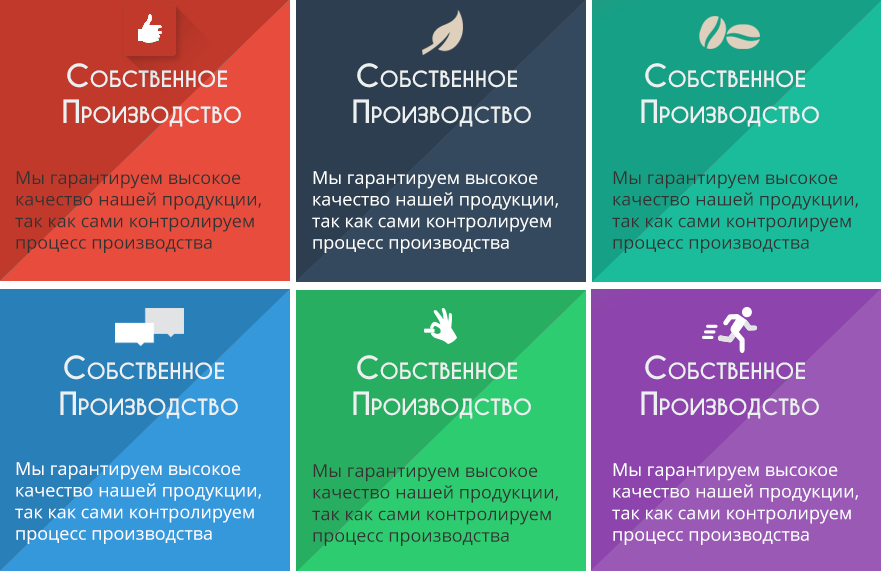
<style>
.page{position:relative;width:881px;height:571px}
.page>*{position:absolute;margin:0}
.t1{font:30px "CaviarDreams-Bold";color:#ecf0f1;font-variant:small-caps}
.t2{font:18px "OpenSans";color:#333333}
.t3{font:18px "OpenSans";color:#ffffff}
</style>
<div class="page">
<p class="t1" style="left:63px;top:63px;width:178px;height:64px;text-align:center">Собственное <br>Производство</p>
<p class="t1" style="left:353px;top:63px;width:178px;height:64px;text-align:center">Собственное <br>Производство</p>
<p class="t1" style="left:641px;top:63px;width:178px;height:64px;text-align:center">Собственное <br>Производство</p>
<p class="t2" style="left:15px;top:171px;width:246px;height:82px">Мы гарантируем высокое <br>качество нашей продукции, <br>так как сами контролируем <br>процесс производства</p>
<p class="t3" style="left:312px;top:171px;width:246px;height:82px">Мы гарантируем высокое <br>качество нашей продукции, <br>так как сами контролируем <br>процесс производства</p>
<p class="t2" style="left:612px;top:171px;width:246px;height:82px">Мы гарантируем высокое <br>качество нашей продукции, <br>так как сами контролируем <br>процесс производства</p>
<p class="t1" style="left:60px;top:355px;width:178px;height:64px;text-align:center">Собственное <br>Производство</p>
<p class="t1" style="left:353px;top:355px;width:178px;height:64px;text-align:center">Собственное <br>Производство</p>
<p class="t1" style="left:641px;top:355px;width:178px;height:64px;text-align:center">Собственное <br>Производство</p>
<p class="t3" style="left:15px;top:462px;width:246px;height:82px">Мы гарантируем высокое <br>качество нашей продукции, <br>так как сами контролируем <br>процесс производства</p>
<p class="t2" style="left:312px;top:464px;width:246px;height:82px">Мы гарантируем высокое <br>качество нашей продукции, <br>так как сами контролируем <br>процесс производства</p>
<p class="t3" style="left:612px;top:463px;width:246px;height:82px">Мы гарантируем высокое <br>качество нашей продукции, <br>так как сами контролируем <br>процесс производства</p>
</div>
